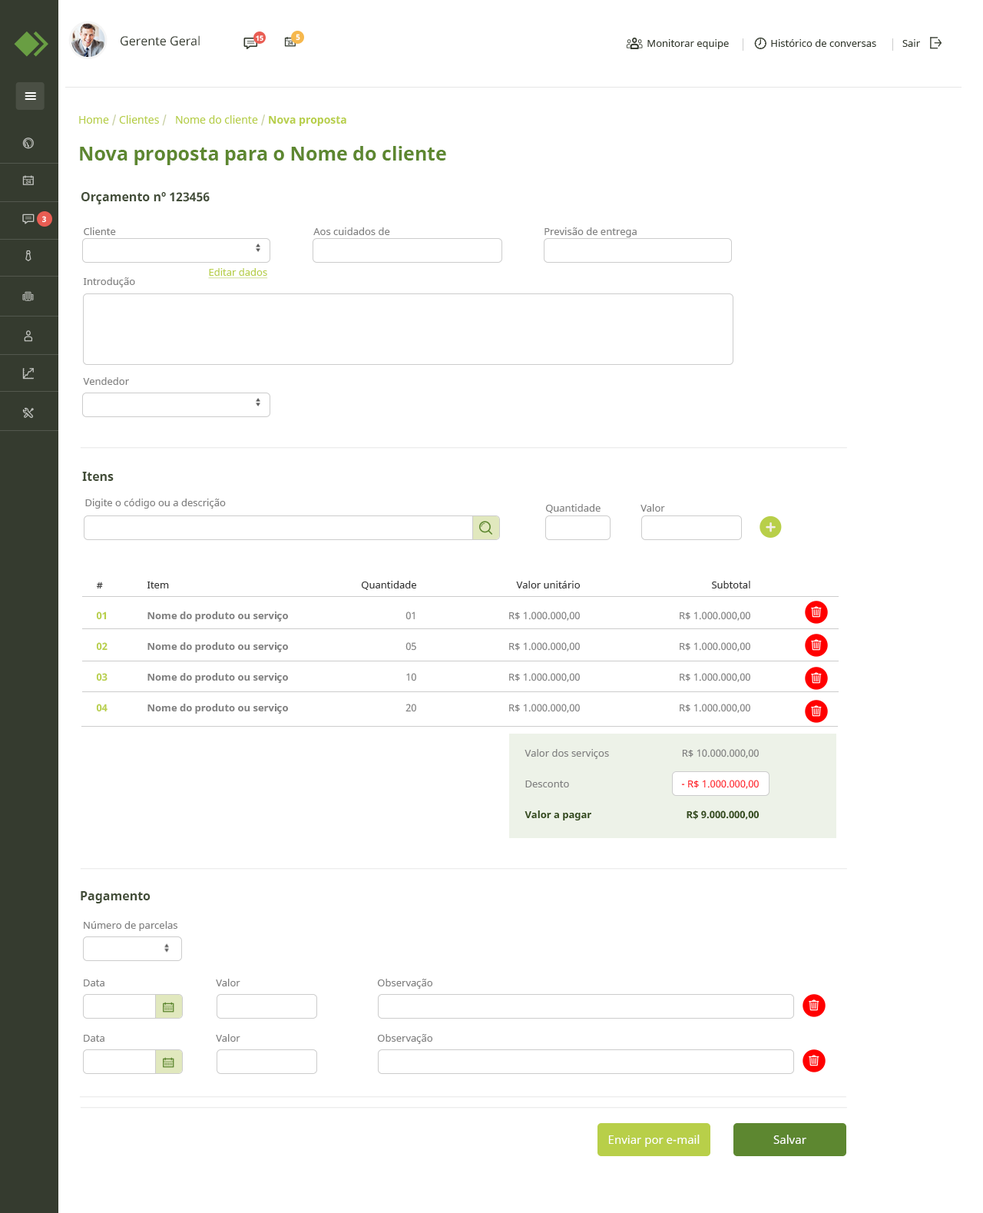
<style>
.page{position:relative;width:983px;height:1213px;background:#ffffff}
.page>*{position:absolute;margin:0}
.t1{font:12.3px "NotoSans";color:#353b2f}
.t2{font:6.9px "NotoSans-Bold";color:#ffffff}
.t3{font:7.7px "NotoSans-Bold";color:#ffffff}
.t4{font:10px "NotoSans";color:#353b2f}
.t5{font:10.8px "NotoSans";color:#b8cf49}
.t6{font:10.8px "NotoSans";color:#c7cfa1}
.t7{font:10.8px "NotoSans-Bold";color:#b8cf49}
.t8{font:19.2px "NotoSans-Bold";color:#5d8730}
.t9{font:12.3px "NotoSans-Bold";color:#424d38}
.t10{font:10px/49.9px "NotoSans";color:#808080}
.t11{font:10px "NotoSans";color:#808080}
.t12{font:10px "NotoSans";color:#b8cf49;text-decoration:underline}
.t13{font:10px/30.7px "NotoSans-Bold";color:#b8cf49}
.t14{font:10px/30.7px "NotoSans";color:#333333}
.t15{font:10px/30.7px "NotoSans-Bold";color:#808080}
.t16{font:10px/30.7px "NotoSans";color:#808080}
.t17{font:10px/30.7px "NotoSans-Bold";color:#324a1a}
.t18{font:10px/30.7px "NotoSans";color:#ff1d25}
.t19{font:11.5px "NotoSans";color:#ffffff}
</style>
<div class="page">
<p class="t1" style="left:121px;top:35px;width:79px;height:11px">Gerente Geral</p>
<p class="t2" style="left:256px;top:35px;width:7px;height:6px">15</p>
<p class="t3" style="left:296px;top:34px;width:4px;height:7px">5</p>
<p class="t4" style="left:648px;top:39px;width:272px;height:10px">Monitorar equipe                Histórico de conversas          Sair</p>
<p class="t5" style="left:79px;top:114px;width:267px;height:12px">Home <span class="t6">/</span> Clientes <span class="t6">/</span>   Nome do cliente <span class="t6">/ </span><span class="t7">Nova proposta</span></p>
<p class="t8" style="left:80px;top:146px;width:366px;height:19px">Nova proposta para o Nome do cliente</p>
<p class="t9" style="left:81px;top:192px;width:129px;height:12px">Orçamento nº 123456</p>
<p class="t3" style="left:42px;top:216px;width:4px;height:7px">3</p>
<p class="t10" style="left:83px;top:227px;width:52px;height:158px">Cliente<br>Introdução<br><br>Vendedor</p>
<p class="t11" style="left:313px;top:227px;width:77px;height:8px">Aos cuidados de</p>
<p class="t11" style="left:545px;top:227px;width:92px;height:10px">Previsão de entrega</p>
<p class="t12" style="left:208px;top:268px;width:60px;height:11px">Editar dados</p>
<p class="t9" style="left:82px;top:472px;width:32px;height:9px">Itens</p>
<p class="t11" style="left:85px;top:499px;width:141px;height:9px">Digite o código ou a descrição</p>
<p class="t11" style="left:545px;top:504px;width:56px;height:9px">Quantidade</p>
<p class="t11" style="left:641px;top:504px;width:24px;height:8px">Valor</p>
<p class="t13" style="left:96px;top:581px;width:12px;height:131px"><span class="t14">#<br></span>01<br>02<br>03<br>04</p>
<p class="t15" style="left:147px;top:581px;width:142px;height:133px"><span class="t14">Item<br></span>Nome do produto ou serviço<br>Nome do produto ou serviço<br>Nome do produto ou serviço<br>Nome do produto ou serviço</p>
<p class="t16" style="left:361px;top:581px;width:55px;height:131px;text-align:right"><span class="t14">Quantidade<br></span>01<br>05<br>10<br>20</p>
<p class="t16" style="left:509px;top:581px;width:71px;height:132px;text-align:right"><span class="t14">Valor unitário<br></span>R$ 1.000.000,00<br>R$ 1.000.000,00<br>R$ 1.000.000,00<br>R$ 1.000.000,00</p>
<p class="t16" style="left:680px;top:581px;width:70px;height:132px;text-align:right"><span class="t14">Subtotal <br></span>R$ 1.000.000,00<br>R$ 1.000.000,00<br>R$ 1.000.000,00<br>R$ 1.000.000,00</p>
<p class="t16" style="left:525px;top:749px;width:84px;height:71px">Valor dos serviços<br>Desconto<br><span class="t17">Valor a pagar</span></p>
<p class="t18" style="left:681px;top:749px;width:79px;height:71px;text-align:right"><span class="t16">R$ 10.000.000,00<br></span>- R$ 1.000.000,00<br><span class="t17">R$ 9.000.000,00</span></p>
<p class="t9" style="left:81px;top:891px;width:70px;height:12px">Pagamento</p>
<p class="t11" style="left:84px;top:921px;width:93px;height:10px">Número de parcelas</p>
<p class="t11" style="left:84px;top:979px;width:20px;height:7px">Data</p>
<p class="t11" style="left:216px;top:979px;width:24px;height:7px">Valor</p>
<p class="t11" style="left:377px;top:979px;width:55px;height:10px">Observação</p>
<p class="t11" style="left:84px;top:1035px;width:20px;height:7px">Data</p>
<p class="t11" style="left:216px;top:1034px;width:24px;height:8px">Valor</p>
<p class="t11" style="left:377px;top:1034px;width:55px;height:10px">Observação</p>
<p class="t19" style="left:608px;top:1134px;width:92px;height:13px">Enviar por e-mail</p>
<p class="t19" style="left:773px;top:1134px;width:34px;height:10px">Salvar</p>
</div>
